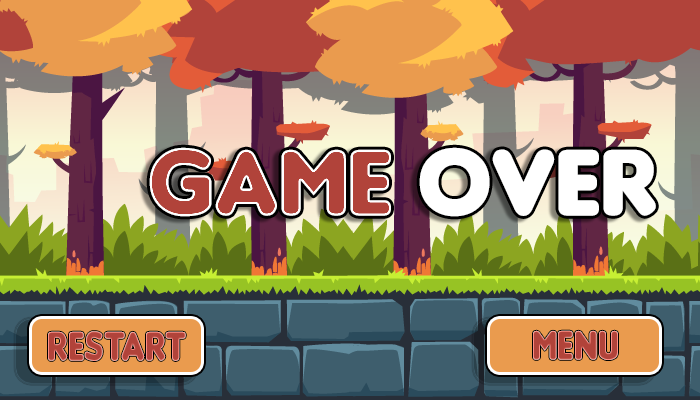
<style>
.page{position:relative;width:700px;height:400px}
.page>*{position:absolute;margin:0}
.t1{font:100px "Insaniburger";color:#b1433a}
.t2{font:100px "Insaniburger";color:#ffffff}
.t3{font:44.1px "Insaniburger";color:#b1433a;scale:0.83 1}
</style>
<div class="page">
<p class="t1" style="left:149px;top:147px;width:507px;height:70px">game <span class="t2">over</span></p>
<p class="t3" style="left:533px;top:330px;width:85px;height:30px">menu</p>
</div>
